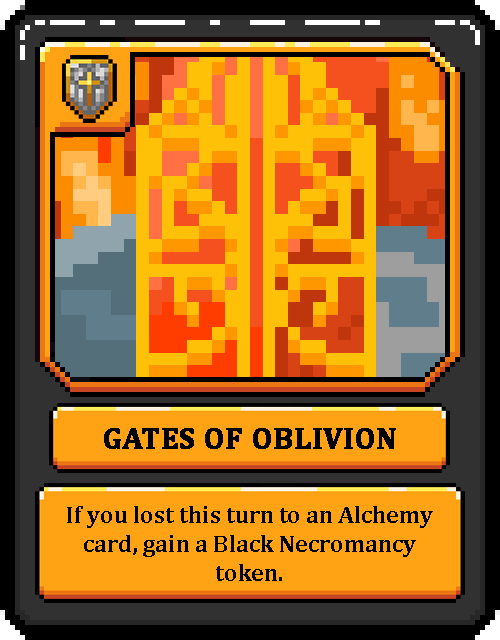
<style>
.page{position:relative;width:500px;height:640px}
.page>*{position:absolute;margin:0}
.t1{font:30px "Cambria-Bold";color:#000000;text-transform:uppercase;font-weight:bold}
.t2{font:24px "Cambria-Bold";color:#000000}
</style>
<div class="page">
<p class="t1" style="left:104px;top:428px;width:292px;height:21px">Gates of Oblivion</p>
<p class="t2" style="left:67px;top:506px;width:366px;height:75px;text-align:center">If you lost this turn to an Alchemy card, gain a Black Necromancy token.</p>
</div>
